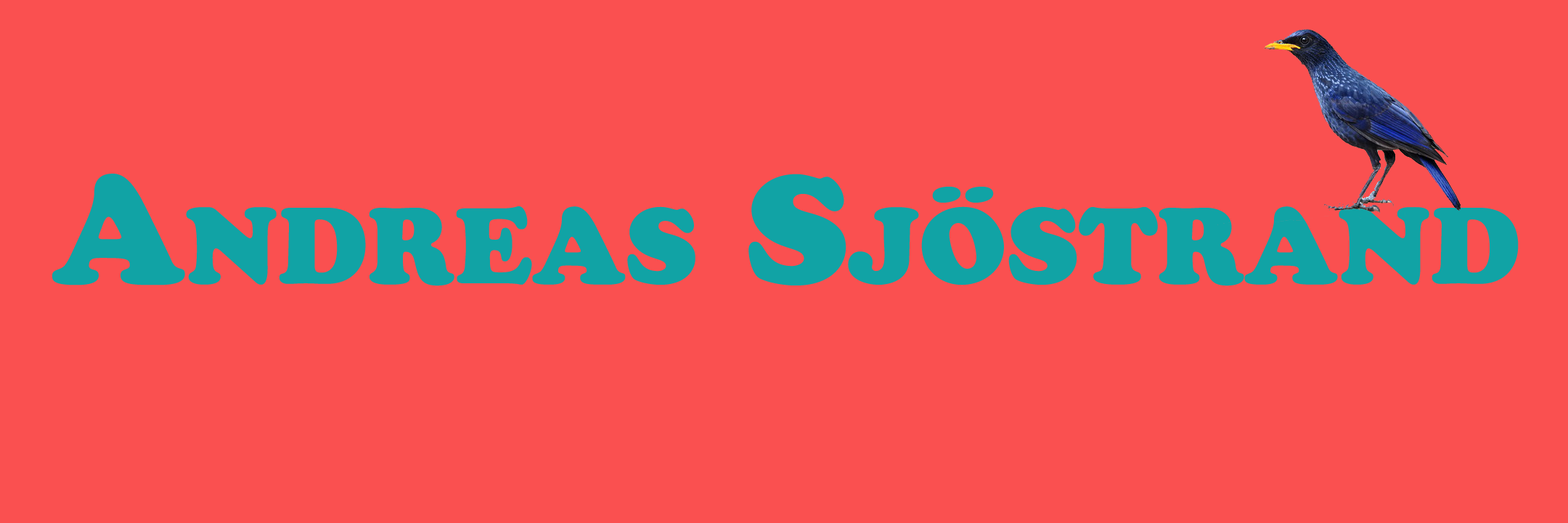
<style>
.page{position:relative;width:1568px;height:523px;background:#fa5050}
.page>*{position:absolute;margin:0}
.t1{font:152.5px "CooperBlackStd";color:#11a3a5;font-variant:small-caps}
</style>
<div class="page">
<p class="t1" style="left:52px;top:173px;width:1467px;height:113px">Andreas Sjöstrand</p>
</div>
